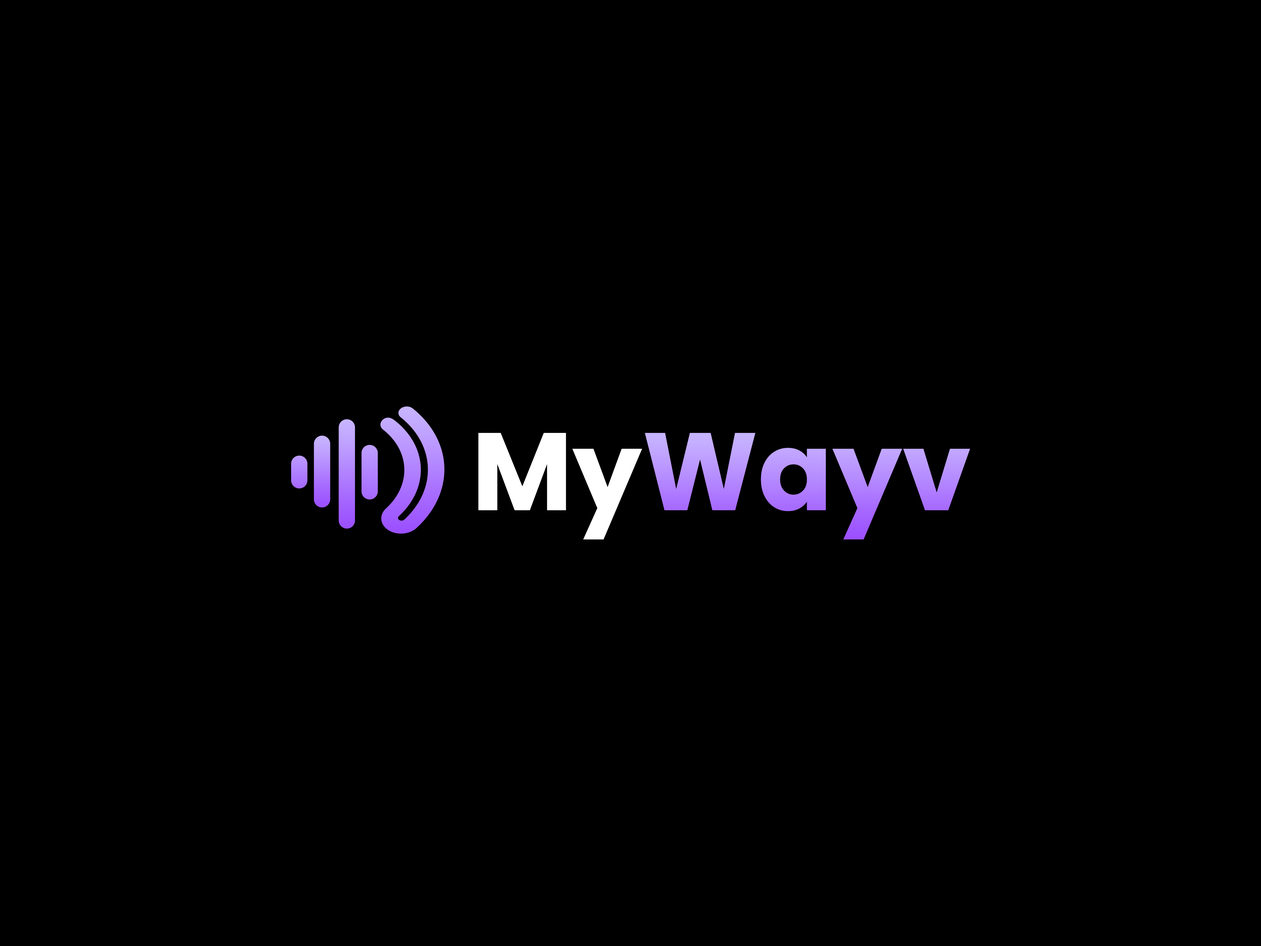
<style>
.page{position:relative;width:1261px;height:946px;background:#000000}
.page>*{position:absolute;margin:0}
.t1{font:110px "Poppins-Bold";color:#ffffff}
.t2{font:110px "Poppins-Bold"}
</style>
<div class="page">
<p class="t1" style="left:478px;top:432px;width:164px;height:107px">My</p>
<p class="t2" style="left:645px;top:432px;width:325px;height:107px">Wayv</p>
</div>
